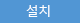
<style>
.page{position:relative;width:80px;height:23px;background:#5196d4}
.page>*{position:absolute;margin:0}
.t1{font:12.5px "MalgunGothic";color:#ffffff}
</style>
<div class="page">
<p class="t1" style="left:26px;top:5px;width:24px;height:12px">설치</p>
</div>
